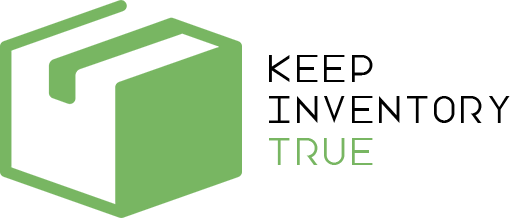
<style>
.page{position:relative;width:510px;height:218px;background:#ffffff}
.page>*{position:absolute;margin:0}
.t1{font:34.3px "LottePaperfang";color:#000000}
.t2{font:34.3px "LottePaperfang";color:#78b662}
</style>
<div class="page">
<p class="t1" style="left:269px;top:55px;width:241px;height:110px">Keep <br>inventory <br><span class="t2">TRUE</span></p>
</div>
